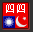
<style>
.page{position:relative;width:33px;height:32px;background:#333333}
.page>*{position:absolute;margin:0}
.t1{font:10.4px "SimSun";color:#ffffff}
</style>
<div class="page">
<p class="t1" style="left:6px;top:4px;width:19px;height:9px">四四</p>
</div>
